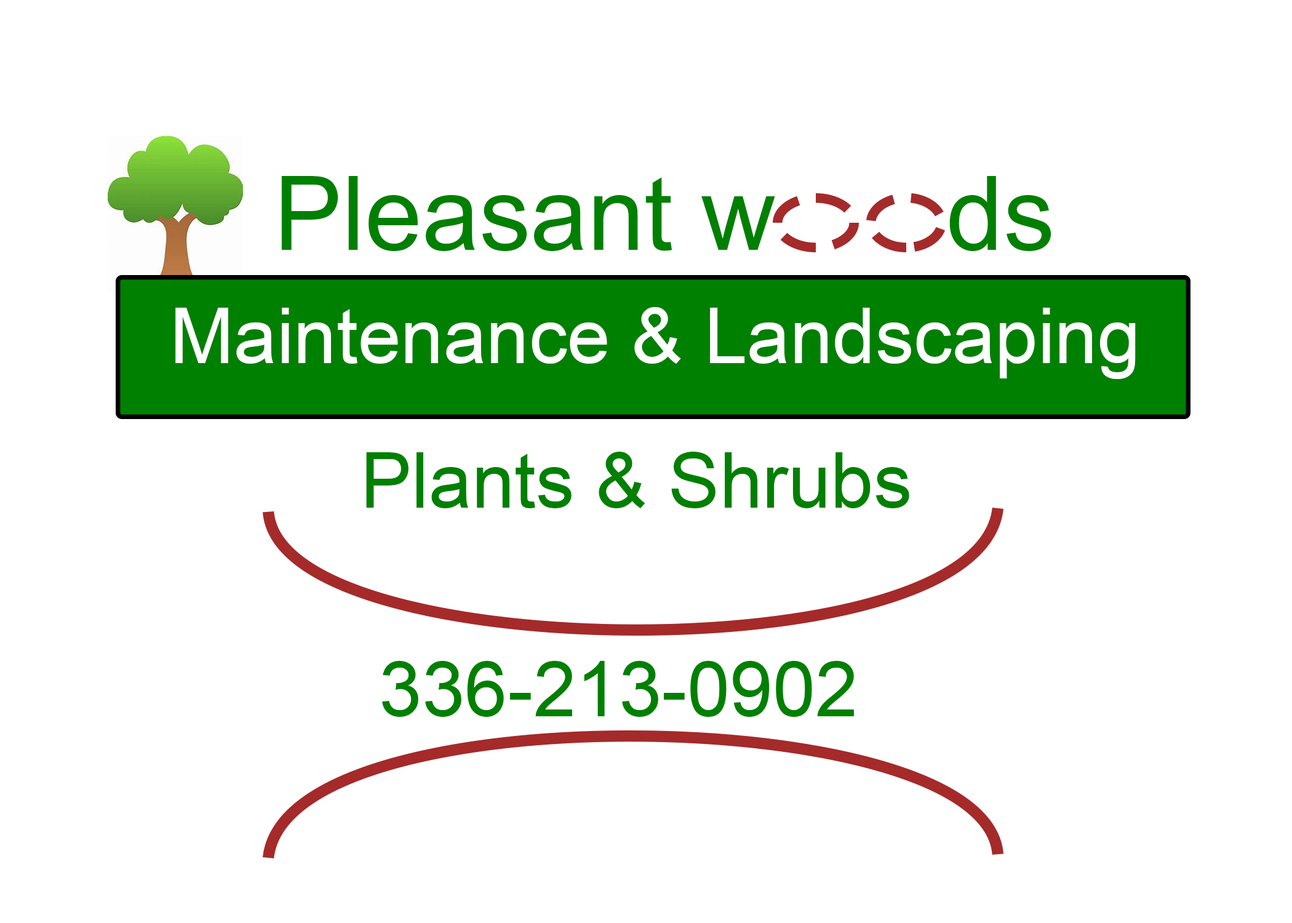
<style>
.page{position:relative;width:1292px;height:923px;background:#ffffff}
.page>*{position:absolute;margin:0}
.t1{font:102.5px "ArialMT";color:#008000}
.t2{font:76.9px "ArialMT";color:#ffffff}
.t3{font:76.9px "ArialMT";color:#008000}
</style>
<div class="page">
<p class="t1" style="left:281px;top:176px;width:770px;height:75px">Pleasant w      ds</p>
<p class="t2" style="left:175px;top:307px;width:961px;height:72px">Maintenance &amp; Landscaping</p>
<p class="t3" style="left:366px;top:452px;width:543px;height:56px">Plants &amp; Shrubs</p>
<p class="t3" style="left:382px;top:661px;width:472px;height:56px">336-213-0902</p>
</div>
